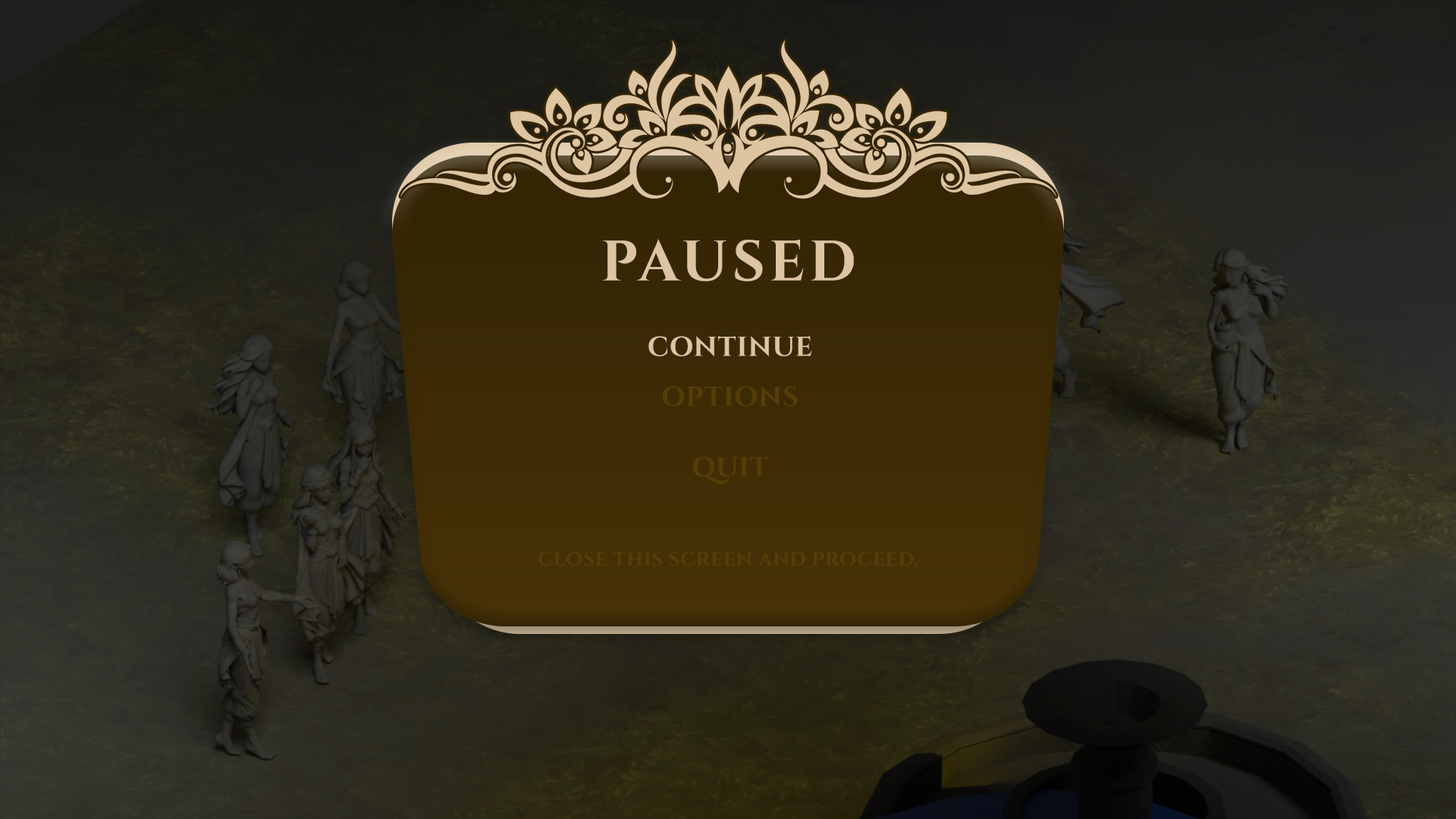
<style>
.page{position:relative;width:1456px;height:819px}
.page>*{position:absolute;margin:0}
.t1{font:56.9px "CinzelRoman-Bold";letter-spacing:0.075em;color:#ddc5a1}
.t2{font:27.3px "CinzelRoman-Bold";letter-spacing:0.025em;color:#ddc5a1}
.t3{font:27.3px "CinzelRoman-Bold";letter-spacing:0.025em;color:#563d07}
.t4{font:19.4px "CinzelRoman-Bold";letter-spacing:0.025em;color:#563d07}
</style>
<div class="page">
<p class="t1" style="left:603px;top:239px;width:251px;height:42px">PAUSED</p>
<p class="t2" style="left:648px;top:336px;width:164px;height:20px">CONTINUE</p>
<p class="t3" style="left:662px;top:386px;width:136px;height:20px">OPTIONS</p>
<p class="t3" style="left:692px;top:457px;width:76px;height:28px">QUIT</p>
<p class="t4" style="left:538px;top:551px;width:380px;height:15px">CLOSE THIS SCREEN AND PROCEED.</p>
</div>
